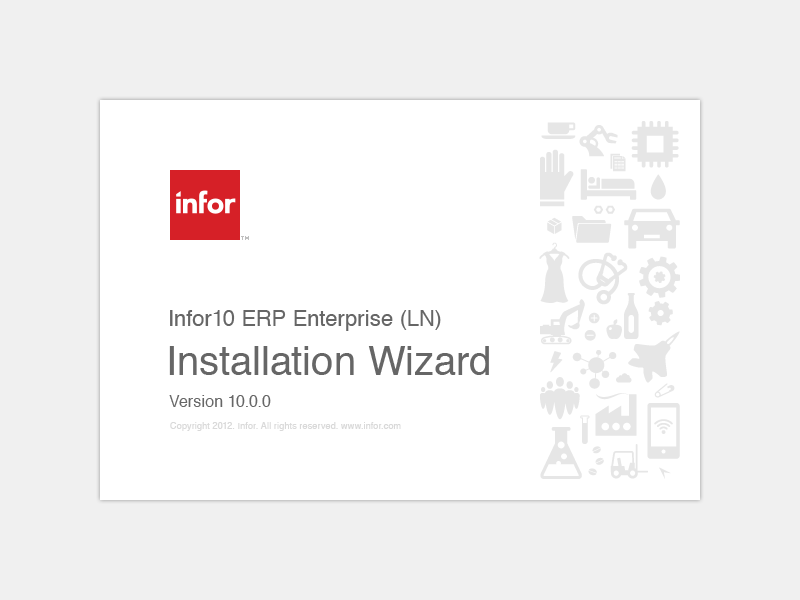
<style>
.page{position:relative;width:800px;height:600px;background:#f0f0f0}
.page>*{position:absolute;margin:0}
.t1{font:22px "Helvetica";letter-spacing:0.01em;color:#666666}
.t2{font:40px "Helvetica";letter-spacing:0.01em;color:#666666}
.t3{font:16px "Helvetica";letter-spacing:0.01em;color:#666666}
.t4{font:9px "Helvetica";letter-spacing:0.01em;color:#d9d9d9}
</style>
<div class="page">
<p class="t1" style="left:170px;top:310px;width:271px;height:21px">Infor10 ERP Enterprise (LN)</p>
<p class="t2" style="left:169px;top:346px;width:320px;height:29px">Installation Wizard</p>
<p class="t3" style="left:169px;top:395px;width:102px;height:12px">Version 10.0.0</p>
<p class="t4" style="left:170px;top:422px;width:231px;height:9px">Copyright 2012. Infor. All rights reserved. www.infor.com</p>
</div>
